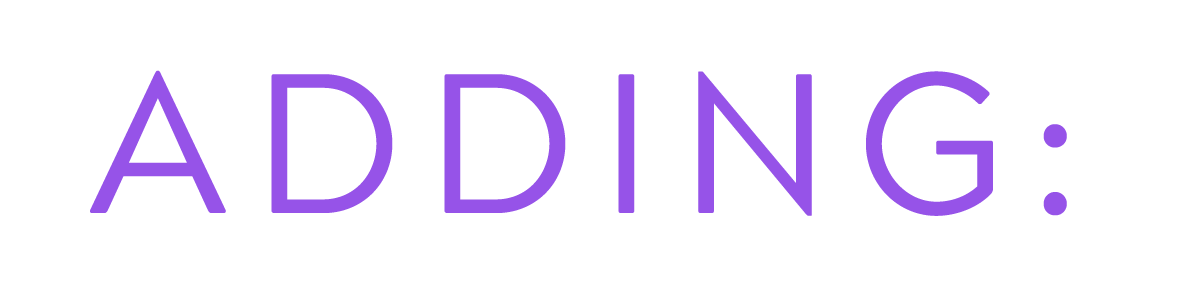
<style>
.page{position:relative;width:1187px;height:288px;background:#ffffff}
.page>*{position:absolute;margin:0}
.t1{font:198.3px "AcherusGrotesque-Regular";letter-spacing:0.12em;color:#9653e8}
</style>
<div class="page">
<p class="t1" style="left:90px;top:70px;width:977px;height:146px">ADDING:</p>
</div>
